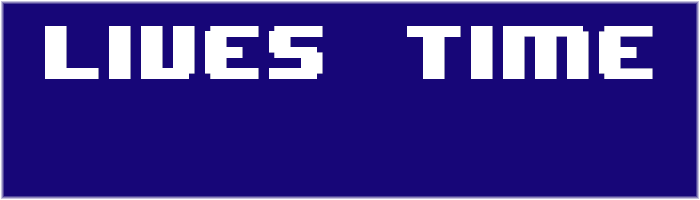
<style>
.page{position:relative;width:700px;height:200px;background:#170678}
.page>*{position:absolute;margin:0}
.t1{font:64px "8BITWONDERNominal";color:#ffffff}
</style>
<div class="page">
<p class="t1" style="left:45px;top:26px;width:278px;height:53px">LIVES</p>
<p class="t1" style="left:407px;top:26px;width:246px;height:53px">Time</p>
</div>
